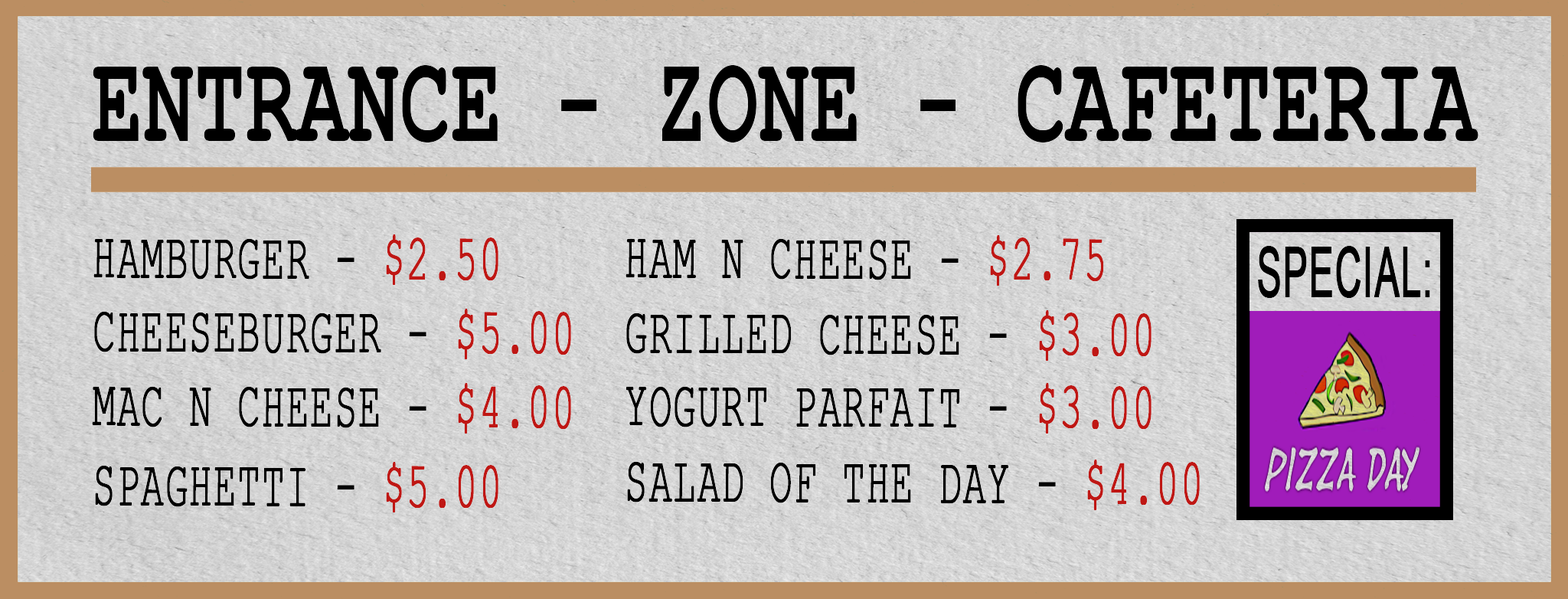
<style>
.page{position:relative;width:1568px;height:599px}
.page>*{position:absolute;margin:0}
.t1{font:124.7px "CourierNewPS-BoldMT";letter-spacing:0.01em;color:#000000;scale:0.67 1}
.t2{font:65.9px "CourierNewPSMT";letter-spacing:0.01em;color:#000000;font-weight:bold;scale:0.58 1}
.t3{font:65.9px "CourierNewPSMT";letter-spacing:0.01em;color:#bf1714;font-weight:bold;scale:0.58 1}
.t4{font:69px "ArialMT";letter-spacing:0.01em;color:#000000;font-weight:bold;scale:0.54 1}
</style>
<div class="page">
<p class="t1" style="left:93px;top:65px;width:1385px;height:77px">ENTRANCE - ZONE - CAFETERIA</p>
<p class="t2" style="left:93px;top:234px;width:405px;height:51px">HAMBURGER - <span class="t3">$2.50</span></p>
<p class="t2" style="left:626px;top:235px;width:478px;height:51px">HAM N CHEESE - <span class="t3">$2.75</span></p>
<p class="t4" style="left:1258px;top:246px;width:172px;height:52px">SPECIAL:</p>
<p class="t2" style="left:94px;top:309px;width:477px;height:50px">CHEESEBURGER - <span class="t3">$5.00</span></p>
<p class="t2" style="left:626px;top:310px;width:526px;height:51px">GRILLED CHEESE - <span class="t3">$3.00</span></p>
<p class="t2" style="left:92px;top:383px;width:479px;height:50px">MAC N CHEESE - <span class="t3">$4.00</span></p>
<p class="t2" style="left:626px;top:383px;width:526px;height:50px">YOGURT PARFAIT - <span class="t3">$3.00</span></p>
<p class="t2" style="left:95px;top:462px;width:403px;height:50px">SPAGHETTI - <span class="t3">$5.00</span></p>
<p class="t2" style="left:627px;top:459px;width:573px;height:51px">SALAD OF THE DAY - <span class="t3">$4.00</span></p>
</div>
